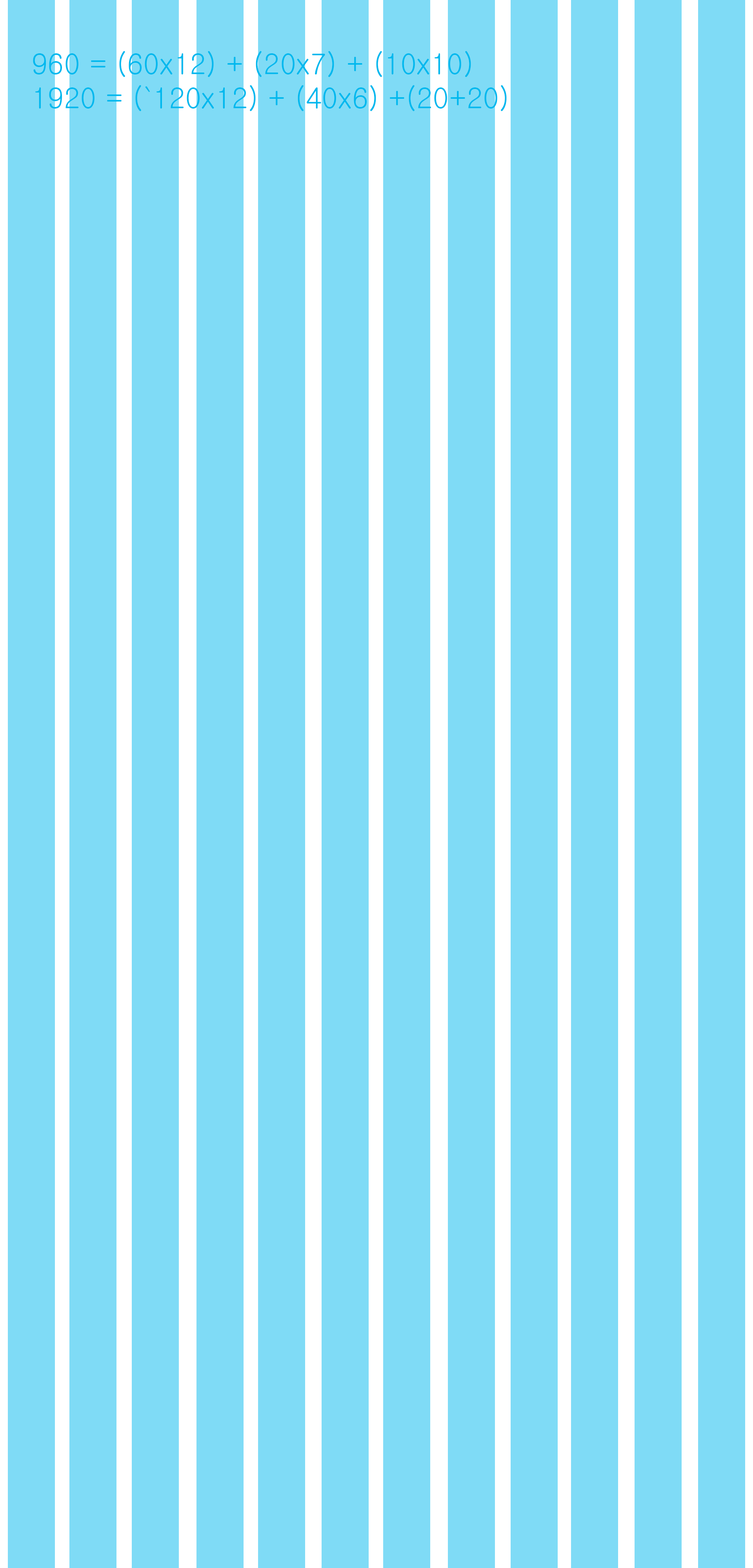
<style>
.page{position:relative;width:753px;height:1568px;background:#7fdbf6}
.page>*{position:absolute;margin:0}
.t1{font:28.2px "Gulim";color:#00b8ee}
</style>
<div class="page">
<p class="t1" style="left:33px;top:51px;width:473px;height:60px">960 = (60x12) + (20x7) + (10x10)<br>1920 = (`120x12) + (40x6) +(20+20)</p>
</div>
